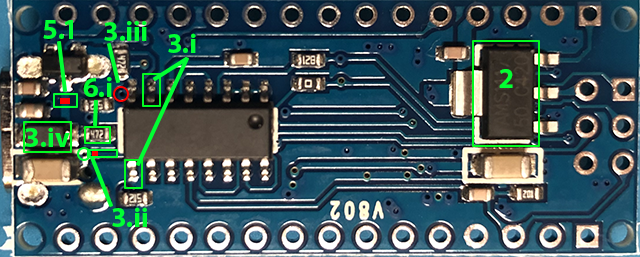
<style>
.page{position:relative;width:640px;height:257px}
.page>*{position:absolute;margin:0}
.t1{font:28px "MyriadPro-Bold";color:#00ff33}
</style>
<div class="page">
<p class="t1" style="left:43px;top:20px;width:30px;height:19px">5.1</p>
<p class="t1" style="left:104px;top:21px;width:43px;height:20px">3.iii</p>
<p class="t1" style="left:168px;top:33px;width:28px;height:20px">3.i</p>
<p class="t1" style="left:83px;top:77px;width:29px;height:20px">6.i</p>
<p class="t1" style="left:499px;top:69px;width:14px;height:19px">2</p>
<p class="t1" style="left:25px;top:127px;width:45px;height:20px">3.iv</p>
<p class="t1" style="left:112px;top:207px;width:35px;height:20px">3.ii</p>
</div>
